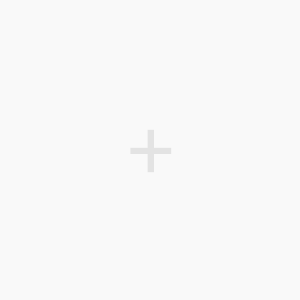
<style>
.page{position:relative;width:300px;height:300px;background:#f9f9f9}
.page>*{position:absolute;margin:0}
.t1{font:80px "MyriadPro-Semibold";color:#e3e3e3}
</style>
<div class="page">
<p class="t1" style="left:130px;top:129px;width:42px;height:44px">+</p>
</div>
